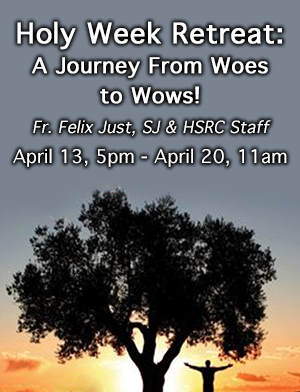
<style>
.page{position:relative;width:300px;height:392px;background:#7a8491}
.page>*{position:absolute;margin:0}
.t1{font:16px/30px "Geneva";letter-spacing:0.01em;color:#ffffff;font-style:italic}
.t2{font:27px/30px "Geneva";letter-spacing:0.01em;color:#ffffff;font-weight:bold}
.t3{font:21px/30px "Geneva";letter-spacing:0.01em;color:#ffffff;font-weight:bold}
.t4{font:18px/30px "Geneva";letter-spacing:0.01em;color:#ffffff}
</style>
<div class="page">
<p class="t1" style="left:13px;top:21px;width:274px;height:146px;text-align:center"><span class="t2">Holy Week Retreat:<br></span><span class="t3">A Journey From Woes <br>to Wows!<br></span>Fr. Felix Just, SJ &amp; HSRC Staff<br><span class="t4">April 13, 5pm - April 20, 11am</span></p>
</div>
